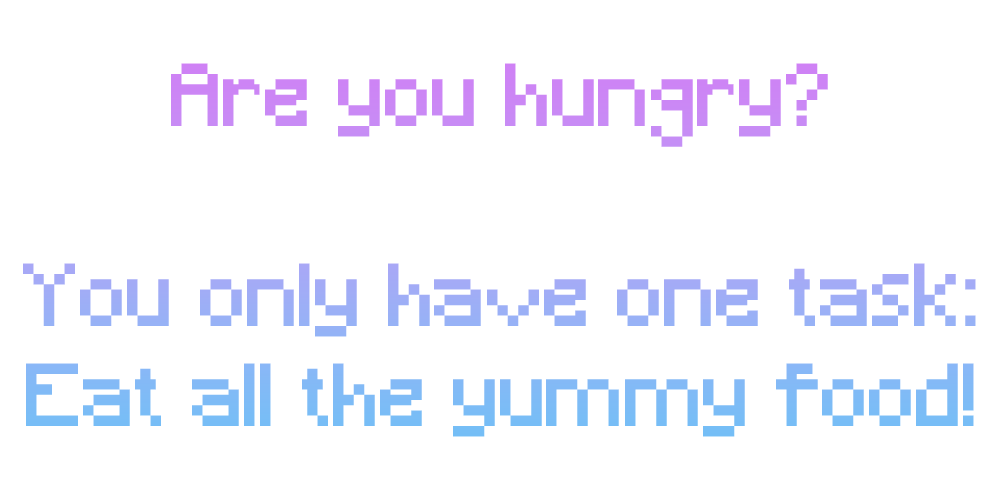
<style>
.page{position:relative;width:1000px;height:500px;background:#ffffff}
.page>*{position:absolute;margin:0}
.t1{font:83.3px "Minecraft"}
</style>
<div class="page">
<p class="t1" style="left:23px;top:63px;width:953px;height:374px;text-align:center">Are you hungry?<br><br>You only have one task:<br>Eat all the yummy food!</p>
</div>
